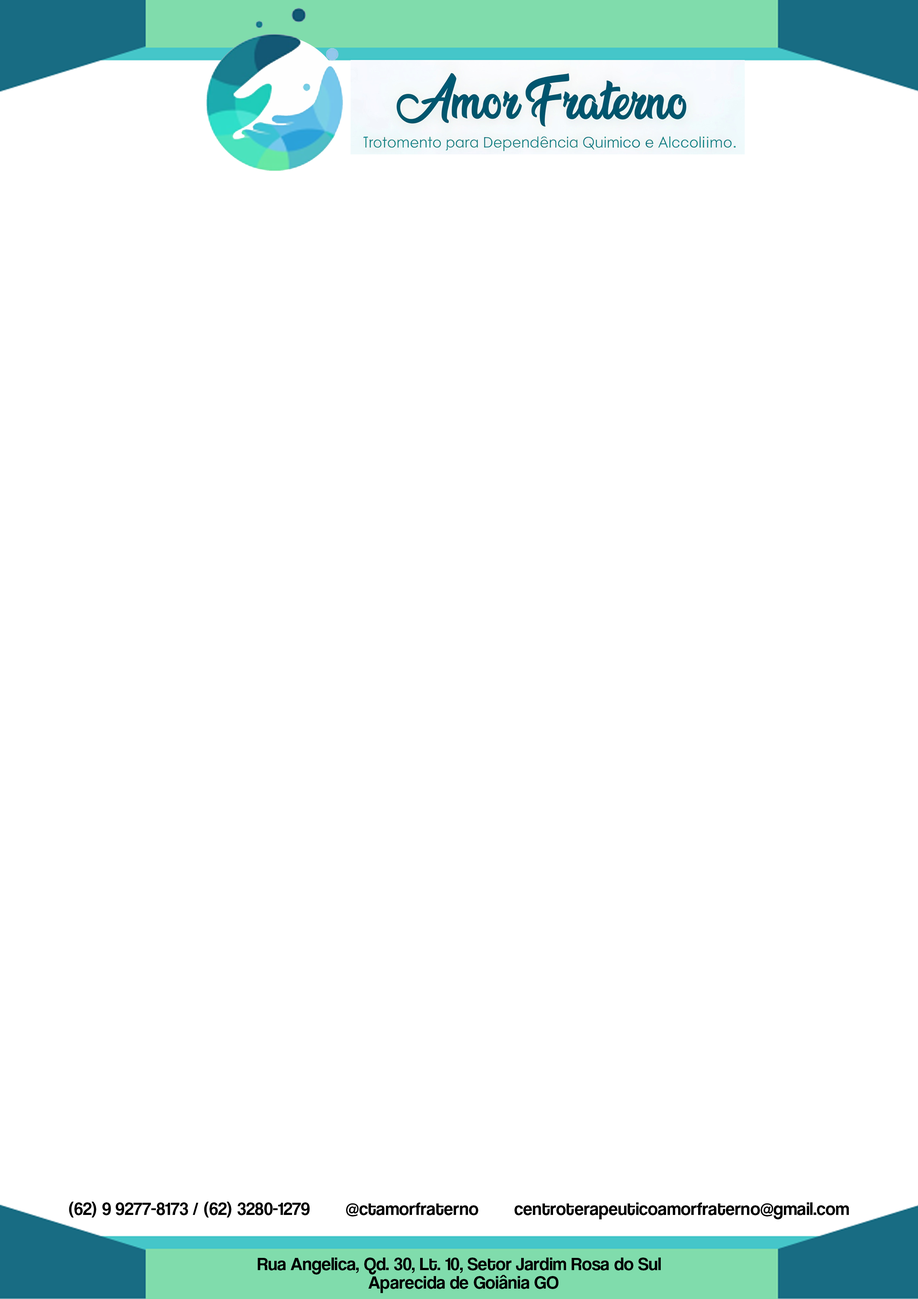
<style>
.page{position:relative;width:918px;height:1299px;background:#ffffff}
.page>*{position:absolute;margin:0}
.t1{font:18.5px "Coolvetica-Regular";color:#000000}
.t2{font:18.5px/18.5px "Coolvetica-Regular";color:#000000}
</style>
<div class="page">
<p class="t1" style="left:69px;top:1201px;width:780px;height:18px">(62) 9 9277-8173 / (62) 3280-1279        @ctamorfraterno        centroterapeuticoamorfraterno@gmail.com</p>
<p class="t2" style="left:258px;top:1257px;width:403px;height:36px;text-align:center">Rua Angelica, Qd. 30, Lt. 10, Setor Jardim Rosa do Sul  <br>Aparecida de Goiânia GO</p>
</div>
